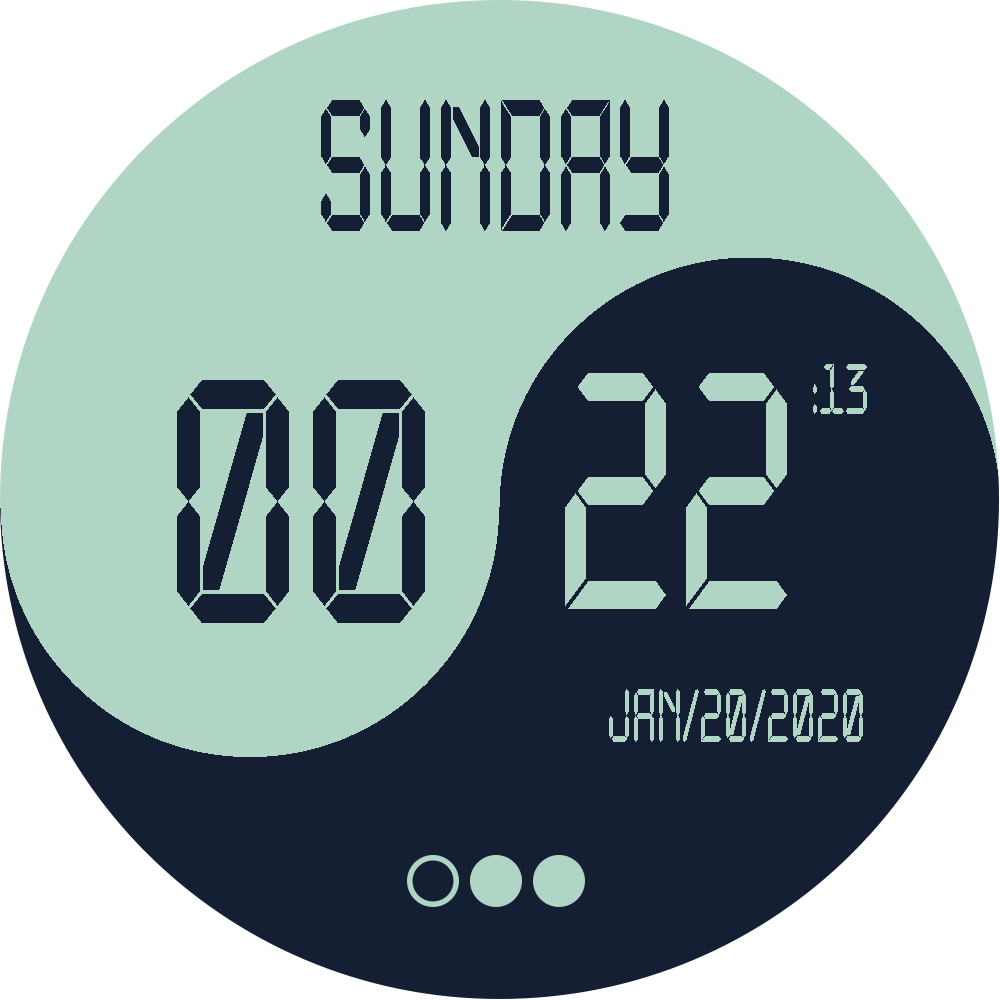
<style>
.page{position:relative;width:1000px;height:1000px;background:#151f33}
.page>*{position:absolute;margin:0}
.t1{font:175.2px "a_LCDNova";color:#151f33;scale:0.65 1}
.t2{font:66px "a_LCDNova";color:#b0d5c5;scale:0.73 1}
.t3{font:314.9px "a_LCDNova";color:#b0d5c5;scale:0.73 1}
.t4{font:323.8px "a_LCDNova";color:#151f33;scale:0.8 1}
.t5{font:70.9px "a_LCDNova";color:#b0d5c5;scale:0.67 1}
</style>
<div class="page">
<p class="t1" style="left:321px;top:100px;width:348px;height:131px">Sunday</p>
<p class="t2" style="left:813px;top:364px;width:54px;height:50px">:13</p>
<p class="t3" style="left:565px;top:373px;width:222px;height:236px">22</p>
<p class="t4" style="left:177px;top:380px;width:248px;height:243px">00</p>
<p class="t5" style="left:609px;top:689px;width:254px;height:53px">jan/20/2020</p>
</div>
